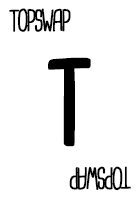
<style>
.page{position:relative;width:140px;height:200px;background:#ffffff}
.page>*{position:absolute;margin:0}
.t1{font:28.7px "CardenioModern-Reg";letter-spacing:-0.1em;color:#000000;text-transform:uppercase;font-weight:bold;scale:0.87 1}
.t2{font:115px "CardenioModern-Bold";letter-spacing:-0.1em;color:#000000;text-transform:uppercase;font-weight:bold;scale:0.87 1}
</style>
<div class="page">
<p class="t1" style="left:9px;top:8px;width:62px;height:24px">topswap</p>
<p class="t2" style="left:48px;top:57px;width:43px;height:90px">T</p>
<p class="t1" style="left:69px;top:166px;width:62px;height:25px;rotate:180deg">topswap</p>
</div>
